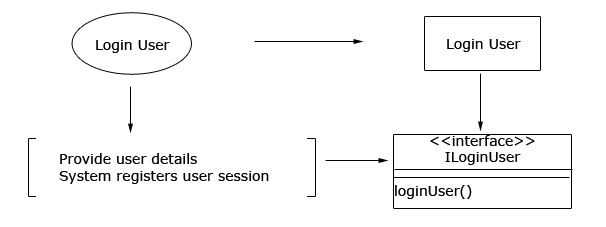
<style>
.page{position:relative;width:606px;height:227px;background:#ffffff}
.page>*{position:absolute;margin:0}
.t1{font:14px "Verdana";color:#000000}
</style>
<div class="page">
<p class="t1" style="left:96px;top:40px;width:74px;height:13px">Login User</p>
<p class="t1" style="left:447px;top:39px;width:74px;height:13px">Login User</p>
<p class="t1" style="left:395px;top:135px;width:140px;height:64px;text-align:center">&lt;&lt;interface&gt;&gt;<br>ILoginUser<br><br>loginUser()</p>
<p class="t1" style="left:59px;top:153px;width:210px;height:31px">Provide user details<br>System registers user session</p>
</div>
